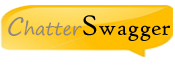
<style>
.page{position:relative;width:175px;height:65px;background:#ffffff}
.page>*{position:absolute;margin:0}
.t1{font:18px "SegoePrint";color:#8e877f}
.t2{font:24px "SegoePrint";color:#8e877f}
.t3{font:30px "HighTowerText-Reg";color:#000000}
.t4{font:24px "HighTowerText-Reg";color:#000000}
</style>
<div class="page">
<p class="t1" style="left:8px;top:15px;width:162px;height:26px"><span class="t2">C</span>hatter<span class="t3">S</span><span class="t4">wagger</span></p>
</div>
